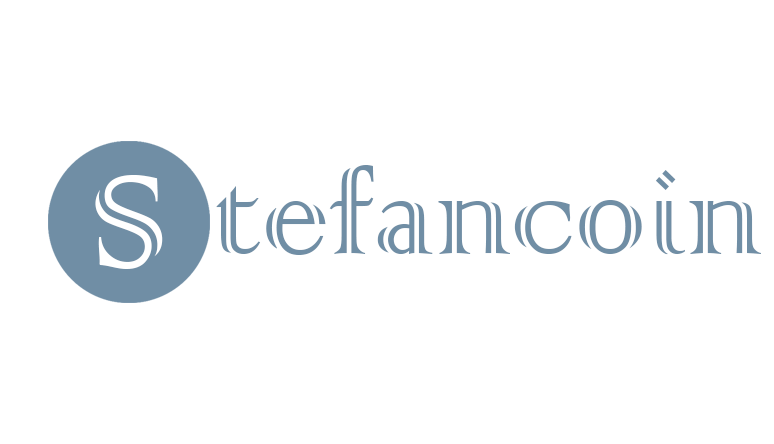
<style>
.page{position:relative;width:774px;height:444px;background:#ffffff}
.page>*{position:absolute;margin:0}
.t1{font:147.7px "ColonnaMT";color:#708ea5;scale:0.96 1}
.t2{font:176px "ColonnaMT";color:#ffffff;scale:0.96 1}
</style>
<div class="page">
<p class="t1" style="left:216px;top:165px;width:545px;height:90px">tefancoin</p>
<p class="t2" style="left:95px;top:175px;width:68px;height:94px">S</p>
</div>
